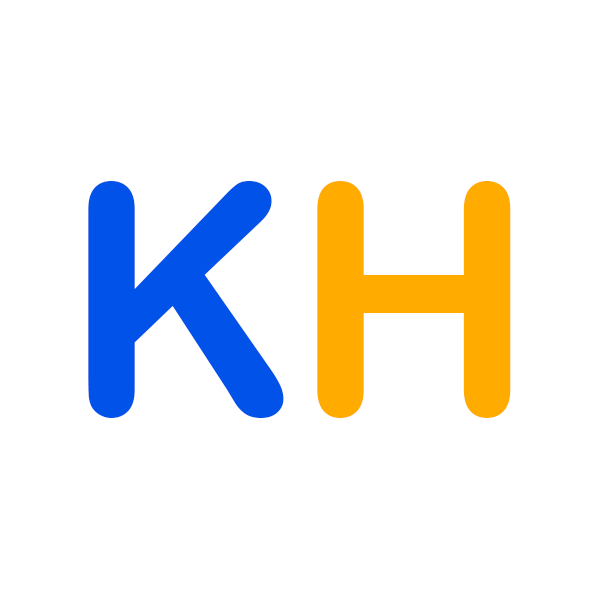
<style>
.page{position:relative;width:600px;height:600px;background:#ffffff}
.page>*{position:absolute;margin:0}
.t1{font:320px "ArialRoundedMTBold";letter-spacing:-0.025em;color:#0052e9}
.t2{font:320px "ArialRoundedMTBold";letter-spacing:-0.025em;color:#ffab00}
</style>
<div class="page">
<p class="t1" style="left:88px;top:181px;width:423px;height:237px">K<span class="t2">H</span></p>
</div>
